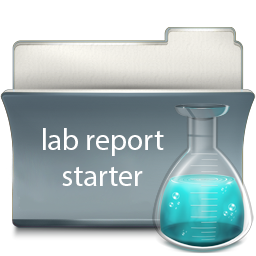
<style>
.page{position:relative;width:256px;height:256px;background:#ffffff}
.page>*{position:absolute;margin:0}
.t1{font:30px "MyriadPro-Regular";color:#ffffff}
</style>
<div class="page">
<p class="t1" style="left:43px;top:128px;width:121px;height:58px;text-align:center">lab report<br>starter</p>
</div>
